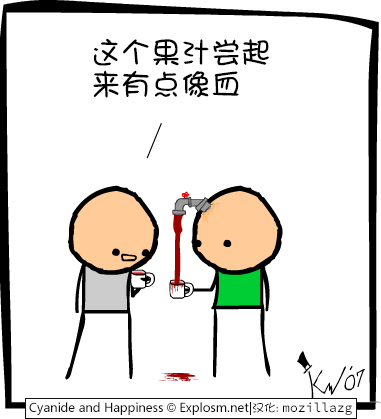
<style>
.page{position:relative;width:381px;height:419px;background:#ffffff}
.page>*{position:absolute;margin:0}
.t1{font:30px/32px "DFGirl";color:#000000}
</style>
<div class="page">
<p class="t1" style="left:93px;top:38px;width:176px;height:60px">这个果汁尝起<br>来有点像血</p>
</div>
